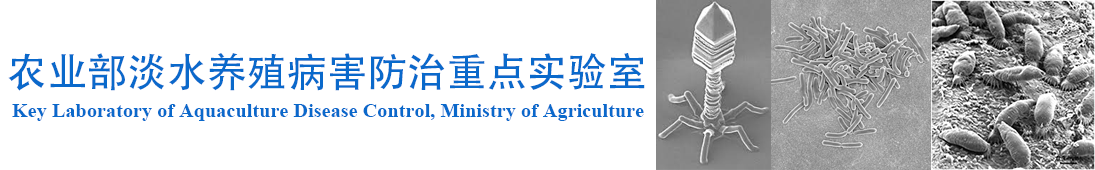
<style>
.page{position:relative;width:1095px;height:170px;background:#ffffff}
.page>*{position:absolute;margin:0}
.t1{font:40px "AdobeHeitiStd-Regular";color:#0a69cb}
.t2{font:20.3px "TimesNewRomanPS-BoldMT";color:#0a69cb}
</style>
<div class="page">
<p class="t1" style="left:8px;top:53px;width:637px;height:38px">农业部淡水养殖病害防治重点实验室</p>
<p class="t2" style="left:12px;top:104px;width:632px;height:17px">Key Laboratory of Aquaculture Disease Control, Ministry of Agriculture</p>
</div>
